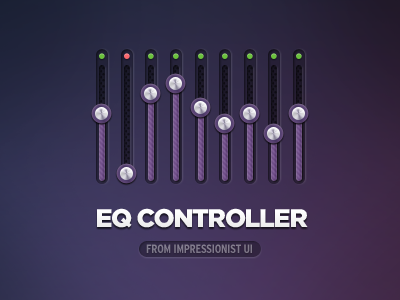
<style>
.page{position:relative;width:400px;height:300px}
.page>*{position:absolute;margin:0}
.t1{font:25.5px "Gotham-Black";letter-spacing:-0.05em;color:#f5f5f5;text-transform:uppercase}
.t2{font:12px "InterstateCondensedBold";letter-spacing:-0.02em;color:#817b8c;text-transform:uppercase}
</style>
<div class="page">
<p class="t1" style="left:97px;top:208px;width:211px;height:20px">eq controller</p>
<p class="t2" style="left:146px;top:244px;width:106px;height:9px">from impressionist ui</p>
</div>
